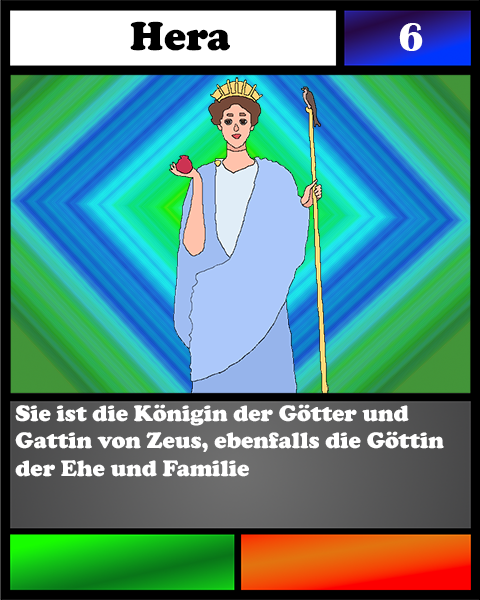
<style>
.page{position:relative;width:480px;height:600px}
.page>*{position:absolute;margin:0}
.t1{font:41.7px "CooperBlack";color:#000000}
.t2{font:41.7px "BritannicBold";color:#ffffff}
.t3{font:23.1px "CooperBlack";color:#ffffff}
</style>
<div class="page">
<p class="t1" style="left:130px;top:21px;width:100px;height:30px">Hera</p>
<p class="t2" style="left:399px;top:23px;width:24px;height:28px">6</p>
<p class="t3" style="left:15px;top:404px;width:429px;height:73px">Sie ist die Königin der Götter und Gattin von Zeus, ebenfalls die Göttin der Ehe und Familie</p>
</div>
